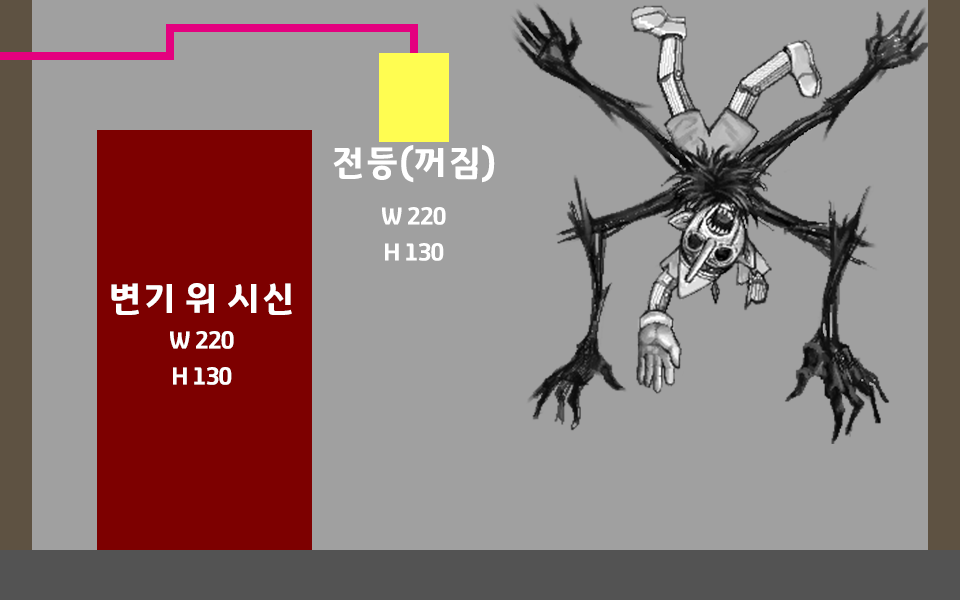
<style>
.page{position:relative;width:960px;height:600px;background:#a0a0a0}
.page>*{position:absolute;margin:0}
.t1{font:24px/36px "GyeonggiTitleV";letter-spacing:-0.05em;color:#ffffff}
.t2{font:36px/12px "GyeonggiTitleV";letter-spacing:-0.05em;color:#ffffff}
</style>
<div class="page">
<p class="t1" style="left:333px;top:145px;width:162px;height:116px;text-align:center"><span class="t2">전등(꺼짐)<br><br><br><br><br></span>W 220<br>H 130</p>
<p class="t1" style="left:111px;top:283px;width:181px;height:102px;text-align:center"><span class="t2">변기 위 시신<br><br><br><br></span>W 220<br>H 130</p>
</div>
